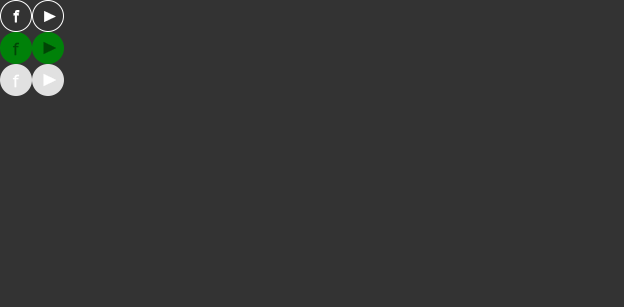
<style>
.page{position:relative;width:624px;height:307px;background:#333333}
.page>*{position:absolute;margin:0}
.t1{font:17.9px "FranklinGothic-Book";letter-spacing:0.08em;color:#ffffff;font-weight:bold}
.t2{font:16.1px "FranklinGothic-Book";letter-spacing:0.08em;color:#ffffff}
.t3{font:17.9px "FranklinGothic-Book";letter-spacing:0.08em;color:#004605}
.t4{font:17.9px "FranklinGothic-Book";letter-spacing:0.08em;color:#004605;font-weight:bold}
.t5{font:17.9px "FranklinGothic-Book";letter-spacing:0.08em;color:#ffffff}
</style>
<div class="page">
<p class="t1" style="left:13px;top:10px;width:7px;height:13px">f</p>
<p class="t2" style="left:44px;top:11px;width:12px;height:11px">►</p>
<p class="t3" style="left:43px;top:41px;width:13px;height:14px">►</p>
<p class="t4" style="left:12px;top:42px;width:8px;height:14px">f</p>
<p class="t1" style="left:12px;top:74px;width:8px;height:14px">f</p>
<p class="t5" style="left:43px;top:73px;width:13px;height:14px">►</p>
</div>
